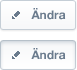
<style>
.page{position:relative;width:77px;height:70px}
.page>*{position:absolute;margin:0}
.t1{font:12px "HelveticaNeue-Bold";color:#6a7b8d}
</style>
<div class="page">
<p class="t1" style="left:31px;top:8px;width:35px;height:12px">Ändra</p>
<p class="t1" style="left:31px;top:48px;width:35px;height:12px">Ändra</p>
</div>
